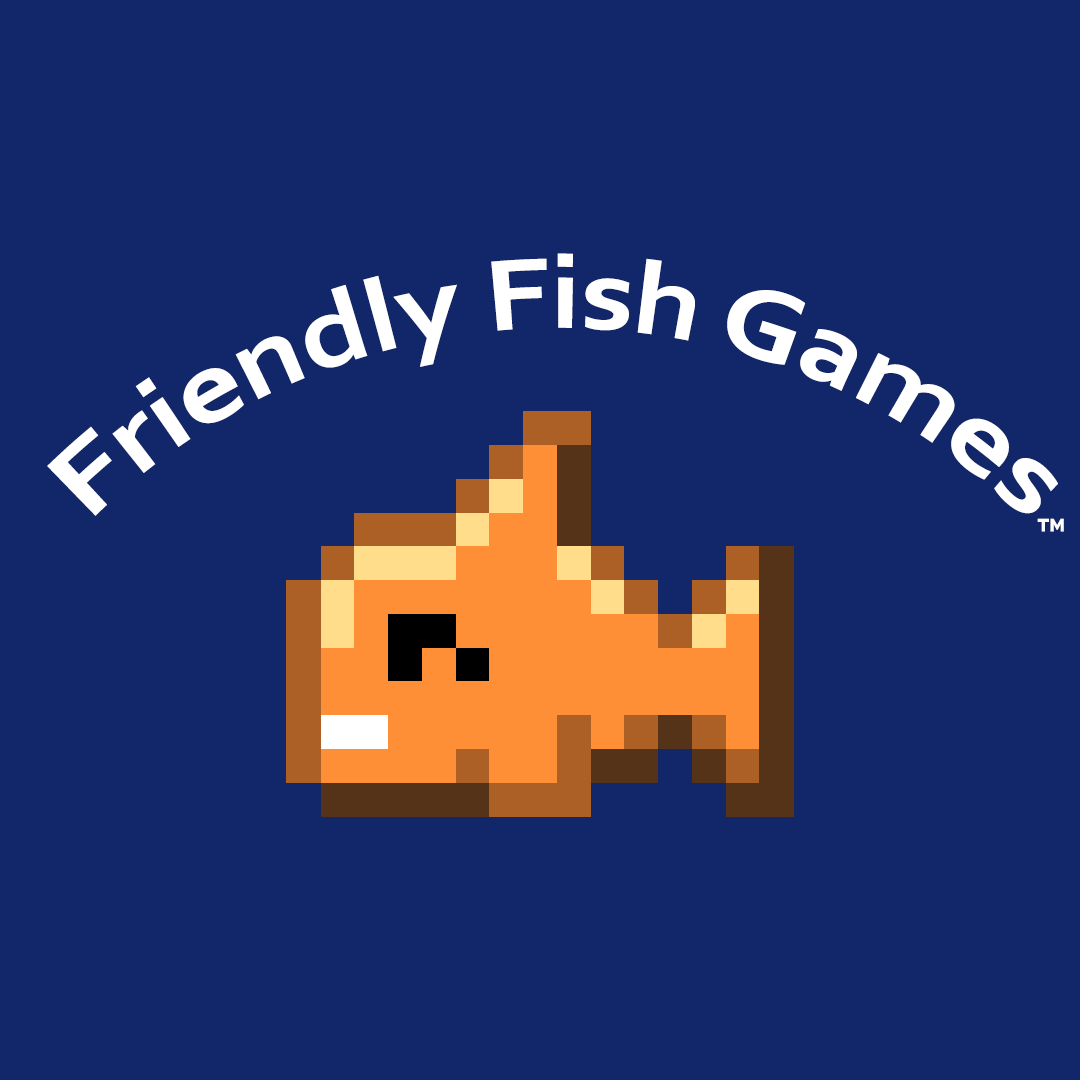
<style>
.page{position:relative;width:1080px;height:1080px;background:#112769}
.page>*{position:absolute;margin:0}
.t1{font:105px/40.8px "Corbel-Bold";color:#ffffff}
.t2{font:42.2px "Bahnschrift";color:#ffffff}
</style>
<div class="page">
<p class="t1" style="left:47px;top:253px;width:1011px;height:263px;text-align:center">Friendly Fish Games</p>
<p class="t2" style="left:1037px;top:518px;width:27px;height:14px">™</p>
</div>
